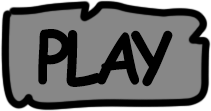
<style>
.page{position:relative;width:211px;height:111px;background:#878787}
.page>*{position:absolute;margin:0}
.t1{font:71px "ComicSansMS-Bold";letter-spacing:-0.105em;color:#000000;scale:0.93 1}
.t2{font:71px "ComicSansMS-Bold";letter-spacing:-0.165em;color:#000000;scale:0.93 1}
</style>
<div class="page">
<p class="t1" style="left:38px;top:29px;width:135px;height:58px">PL<span class="t2">AY</span></p>
</div>
